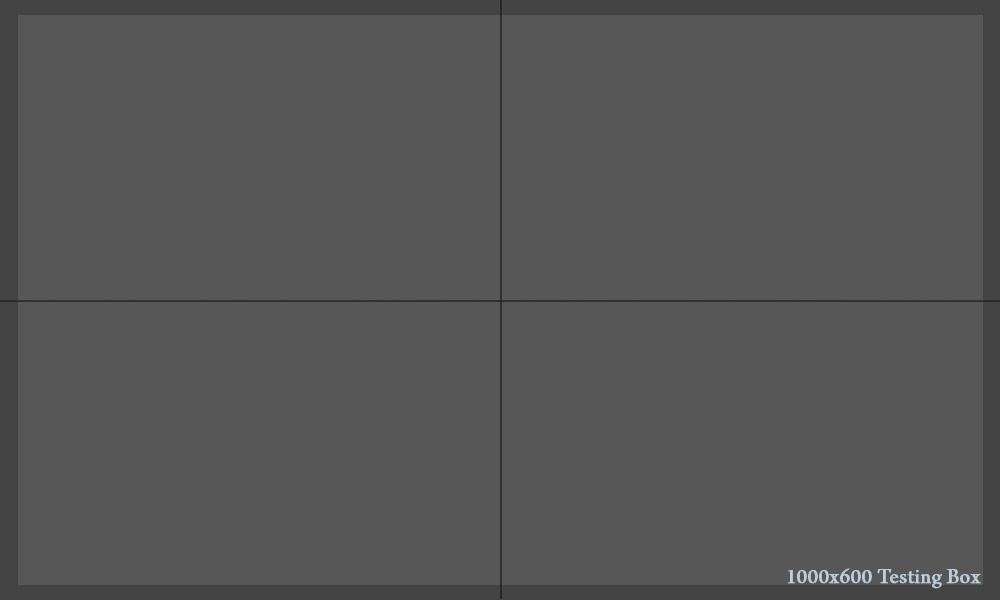
<style>
.page{position:relative;width:1000px;height:600px;background:#575757}
.page>*{position:absolute;margin:0}
.t1{font:22px "ArnoPro-Regular";color:#bacedb;font-weight:bold}
</style>
<div class="page">
<p class="t1" style="left:787px;top:568px;width:194px;height:21px">1000x600 Testing Box</p>
</div>
